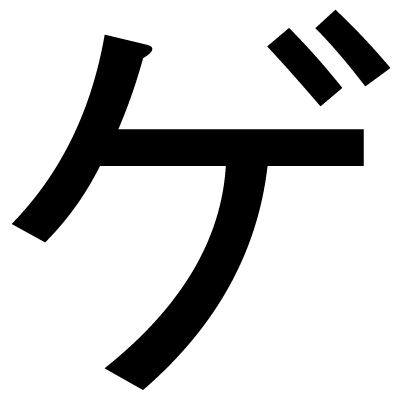
<style>
.page{position:relative;width:400px;height:400px;background:#ffffff}
.page>*{position:absolute;margin:0}
.t1{font:424.8px "MS-PGothic";color:#000000}
</style>
<div class="page">
<p class="t1" style="left:11px;top:9px;width:380px;height:381px">ゲ</p>
</div>
